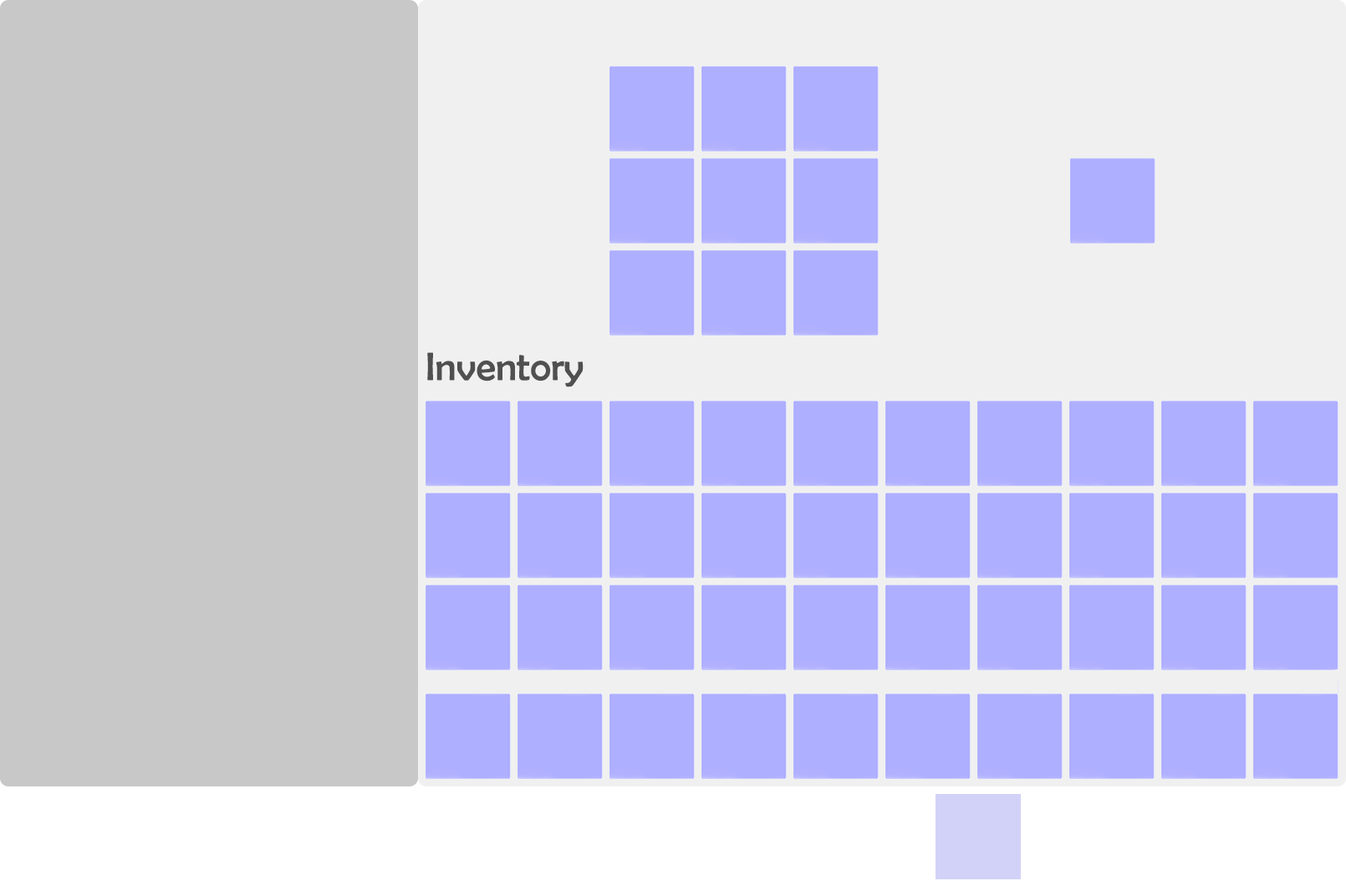
<style>
.page{position:relative;width:1346px;height:886px;background:#c9c8c8}
.page>*{position:absolute;margin:0}
.t1{font:40.1px "BerlinSansFB-Reg";color:#515050}
</style>
<div class="page">
<p class="t1" style="left:427px;top:352px;width:157px;height:35px">Inventory</p>
</div>
